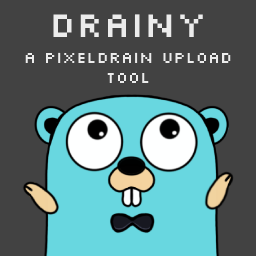
<style>
.page{position:relative;width:256px;height:256px;background:#424242}
.page>*{position:absolute;margin:0}
.t1{font:38px "Silkscreen";color:#ececec}
.t2{font:17px "Silkscreen";color:#ececec}
</style>
<div class="page">
<p class="t1" style="left:53px;top:14px;width:150px;height:23px">Drainy</p>
<p class="t2" style="left:25px;top:52px;width:206px;height:31px;text-align:center">A PixelDrain Upload<br>Tool</p>
</div>
